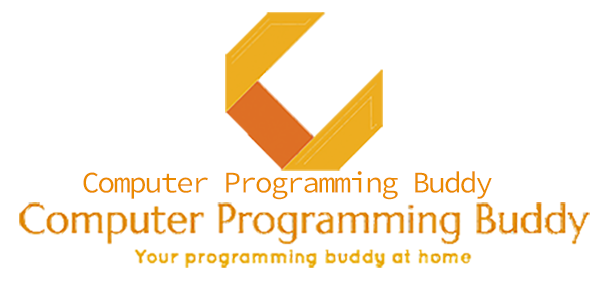
<style>
.page{position:relative;width:600px;height:305px;background:#ffffff}
.page>*{position:absolute;margin:0}
.t1{font:30px "SourceCodePro-Regular";letter-spacing:-0.075em;color:#eb8a00}
</style>
<div class="page">
<p class="t1" style="left:83px;top:171px;width:409px;height:29px">Computer Programming Buddy</p>
</div>
